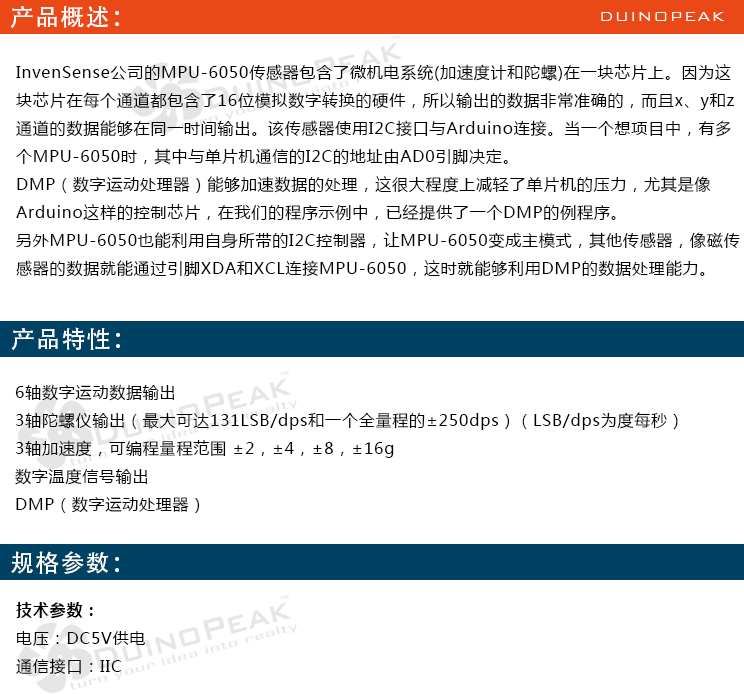
<style>
.page{position:relative;width:744px;height:694px;background:#ffffff}
.page>*{position:absolute;margin:0}
.t1{font:24px "AdobeHeitiStd-Regular";letter-spacing:0.05em;color:#ffffff}
.t2{font:18px "BankGothicBT-Light";letter-spacing:0.05em;color:#ffffff}
.t3{font:16px "MicrosoftYaHei";letter-spacing:0.05em;color:#000000}
.t4{font:16px "MicrosoftYaHei-Bold";letter-spacing:0.05em;color:#000000}
</style>
<div class="page">
<p class="t1" style="left:10px;top:6px;width:109px;height:23px">产品概述：</p>
<p class="t2" style="left:601px;top:12px;width:124px;height:9px">DUINOPEAK</p>
<p class="t3" style="left:16px;top:64px;width:724px;height:213px">InvenSense公司的MPU-6050传感器包含了微机电系统(加速度计和陀螺)在一块芯片上。因为这<br>块芯片在每个通道都包含了16位模拟数字转换的硬件，所以输出的数据非常准确的，而且x、y和z<br>通道的数据能够在同一时间输出。该传感器使用I2C接口与Arduino连接。当一个想项目中，有多<br>个MPU-6050时，其中与单片机通信的I2C的地址由AD0引脚决定。<br>DMP（数字运动处理器）能够加速数据的处理，这很大程度上减轻了单片机的压力，尤其是像<br>Arduino这样的控制芯片，在我们的程序示例中，已经提供了一个DMP的例程序。<br>另外MPU-6050也能利用自身所带的I2C控制器，让MPU-6050变成主模式，其他传感器，像磁传<br>感器的数据就能通过引脚XDA和XCL连接MPU-6050，这时就能够利用DMP的数据处理能力。</p>
<p class="t1" style="left:11px;top:327px;width:109px;height:24px">产品特性：</p>
<p class="t3" style="left:15px;top:384px;width:663px;height:129px">6轴数字运动数据输出<br>3轴陀螺仪输出（最大可达131LSB/dps和一个全量程的±250dps）（LSB/dps为度每秒）<br>3轴加速度，可编程量程范围 ±2，±4，±8，±16g<br>数字温度信号输出<br>DMP（数字运动处理器）</p>
<p class="t1" style="left:11px;top:551px;width:108px;height:23px">规格参数：</p>
<p class="t3" style="left:16px;top:602px;width:130px;height:72px"><span class="t4">技术参数：<br></span>电压：DC5V供电<br>通信接口：IIC</p>
</div>
